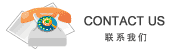
<style>
.page{position:relative;width:174px;height:51px;background:#ffffff}
.page>*{position:absolute;margin:0}
.t1{font:12px "ArialMT";color:#404040;text-transform:uppercase;font-weight:bold}
.t2{font:9px "SimHei";letter-spacing:0.2em;color:#555454;text-transform:uppercase;font-weight:bold}
</style>
<div class="page">
<p class="t1" style="left:84px;top:16px;width:81px;height:10px">Contact us</p>
<p class="t2" style="left:105px;top:33px;width:42px;height:9px">联系我们</p>
</div>
